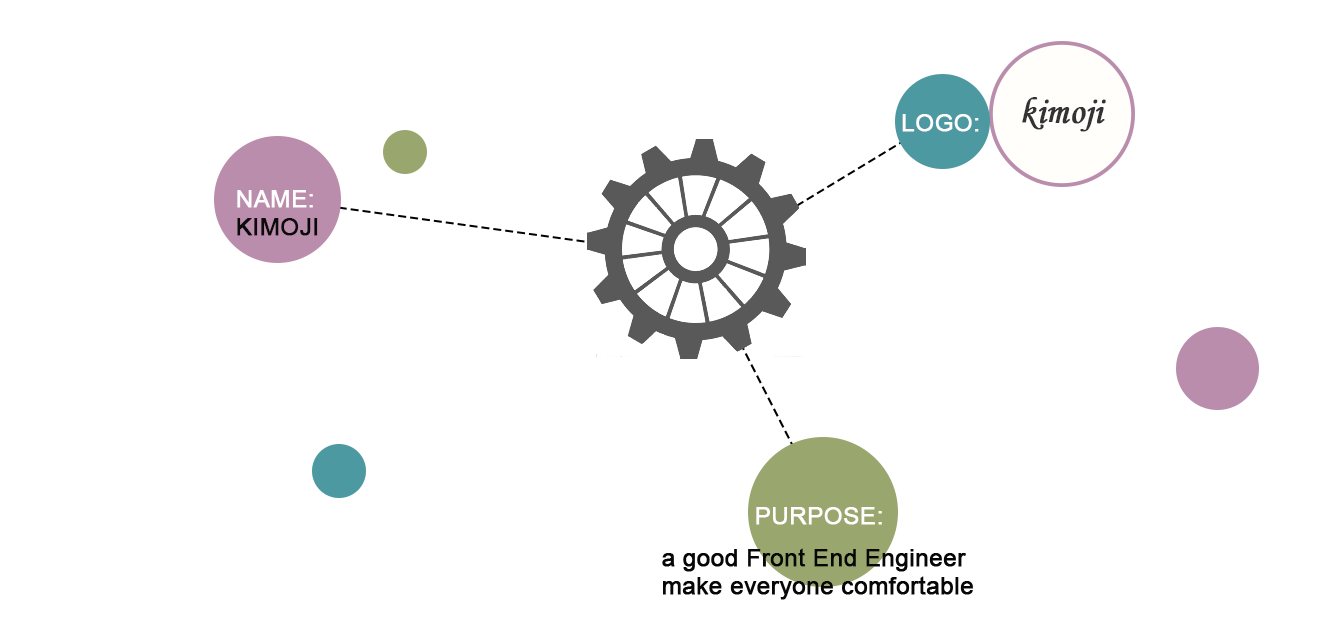
<style>
.page{position:relative;width:1337px;height:631px;background:#ffffff}
.page>*{position:absolute;margin:0}
.t1{font:24px "ArialMT";color:#fffdfd;font-weight:bold}
.t2{font:24px/28px "ArialMT";color:#070707;font-weight:bold}
</style>
<div class="page">
<p class="t1" style="left:902px;top:114px;width:77px;height:18px">LOGO:</p>
<p class="t1" style="left:756px;top:507px;width:126px;height:18px">PURPOSE:</p>
<p class="t2" style="left:662px;top:548px;width:311px;height:52px">a good Front End Engineer<br>make everyone comfortable</p>
</div>
